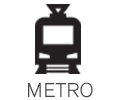
<style>
.page{position:relative;width:120px;height:100px;background:#ffffff}
.page>*{position:absolute;margin:0}
.t1{font:20px "AkzidenzGroteskBE-Light";color:#444242}
</style>
<div class="page">
<p class="t1" style="left:28px;top:82px;width:65px;height:16px">METRO</p>
</div>
